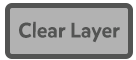
<style>
.page{position:relative;width:136px;height:60px;background:#b2b2b2}
.page>*{position:absolute;margin:0}
.t1{font:20.8px "MikadoMedium";color:#535453}
.t2{font:12.5px "MikadoMedium";color:#535453}
</style>
<div class="page">
<p class="t1" style="left:19px;top:21px;width:101px;height:22px"><span class="t2"><br></span>Clear Layer</p>
</div>
